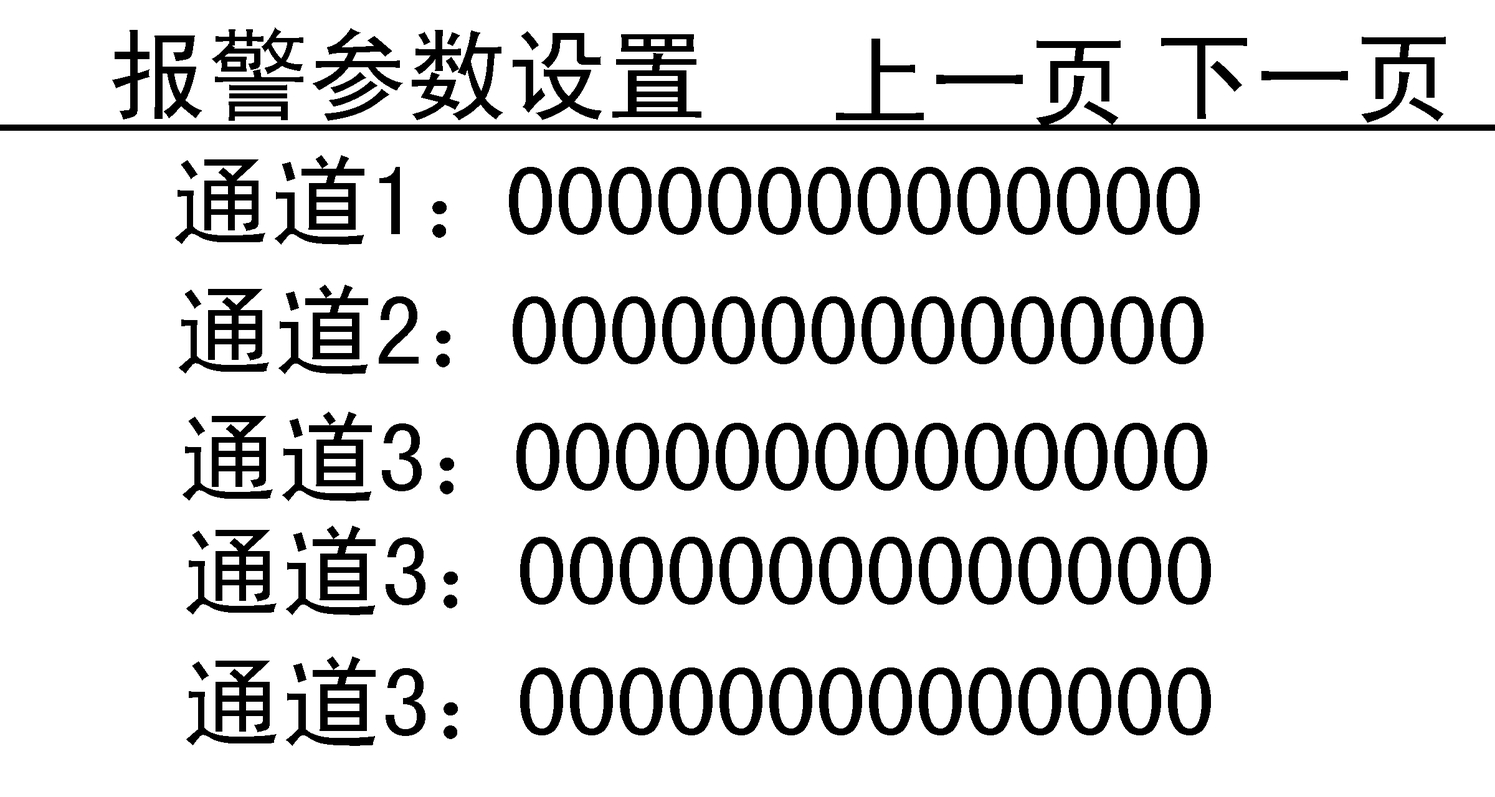
<style>
.page{position:relative;width:1495px;height:797px;background:#ffffff}
.page>*{position:absolute;margin:0}
.t1{font:99.7px "SimHei";color:#000000}
</style>
<div class="page">
<p class="t1" style="left:112px;top:27px;width:590px;height:94px">报警参数设置</p>
<p class="t1" style="left:836px;top:39px;width:285px;height:87px">上一页</p>
<p class="t1" style="left:1161px;top:37px;width:285px;height:86px">下一页</p>
<p class="t1" style="left:175px;top:155px;width:272px;height:90px">通道1：</p>
<p class="t1" style="left:509px;top:167px;width:691px;height:68px">00000000000000</p>
<p class="t1" style="left:179px;top:285px;width:271px;height:89px">通道2：</p>
<p class="t1" style="left:513px;top:297px;width:691px;height:67px">00000000000000</p>
<p class="t1" style="left:183px;top:412px;width:271px;height:90px">通道3：</p>
<p class="t1" style="left:516px;top:423px;width:691px;height:68px">00000000000000</p>
<p class="t1" style="left:186px;top:526px;width:272px;height:90px">通道3：</p>
<p class="t1" style="left:520px;top:537px;width:691px;height:68px">00000000000000</p>
<p class="t1" style="left:186px;top:657px;width:272px;height:89px">通道3：</p>
<p class="t1" style="left:520px;top:668px;width:691px;height:68px">00000000000000</p>
</div>
